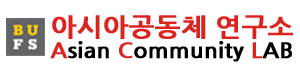
<style>
.page{position:relative;width:300px;height:70px;background:#ffffff}
.page>*{position:absolute;margin:0}
.t1{font:25.2px/25.2px "NanumGothicBold";color:#dc241f;font-weight:bold;scale:1.07 1}
.t2{font:21px/25.2px "NanumGothicBold";color:#dc241f;font-weight:bold;scale:1.07 1}
.t3{font:21px/25.2px "NanumGothicBold";color:#000000;font-weight:bold;scale:1.07 1}
</style>
<div class="page">
<p class="t1" style="left:50px;top:15px;width:243px;height:47px">아시아공동체 연구소<br><span class="t2">A</span><span class="t3">sian </span><span class="t2">C</span><span class="t3">ommunity </span><span class="t2">L</span><span class="t3">AB</span></p>
</div>
